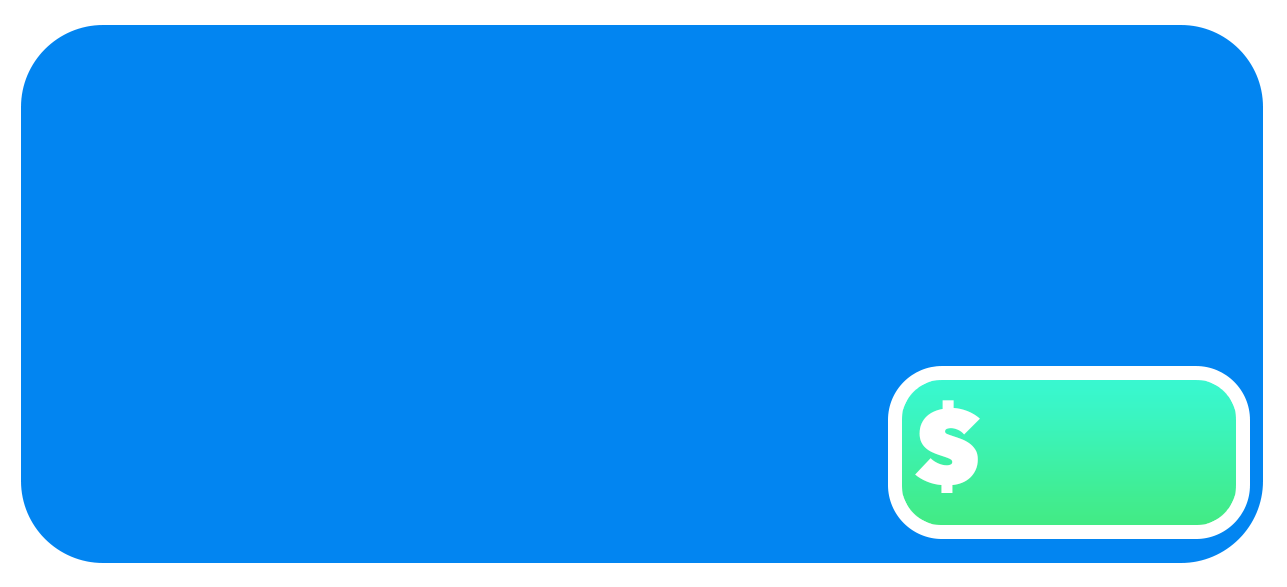
<style>
.page{position:relative;width:1287px;height:587px;background:#0285f1}
.page>*{position:absolute;margin:0}
.t1{font:106px "AvenirNext-Heavy";letter-spacing:0.06em;color:#ffffff}
</style>
<div class="page">
<p class="t1" style="left:915px;top:400px;width:65px;height:93px">$</p>
</div>
